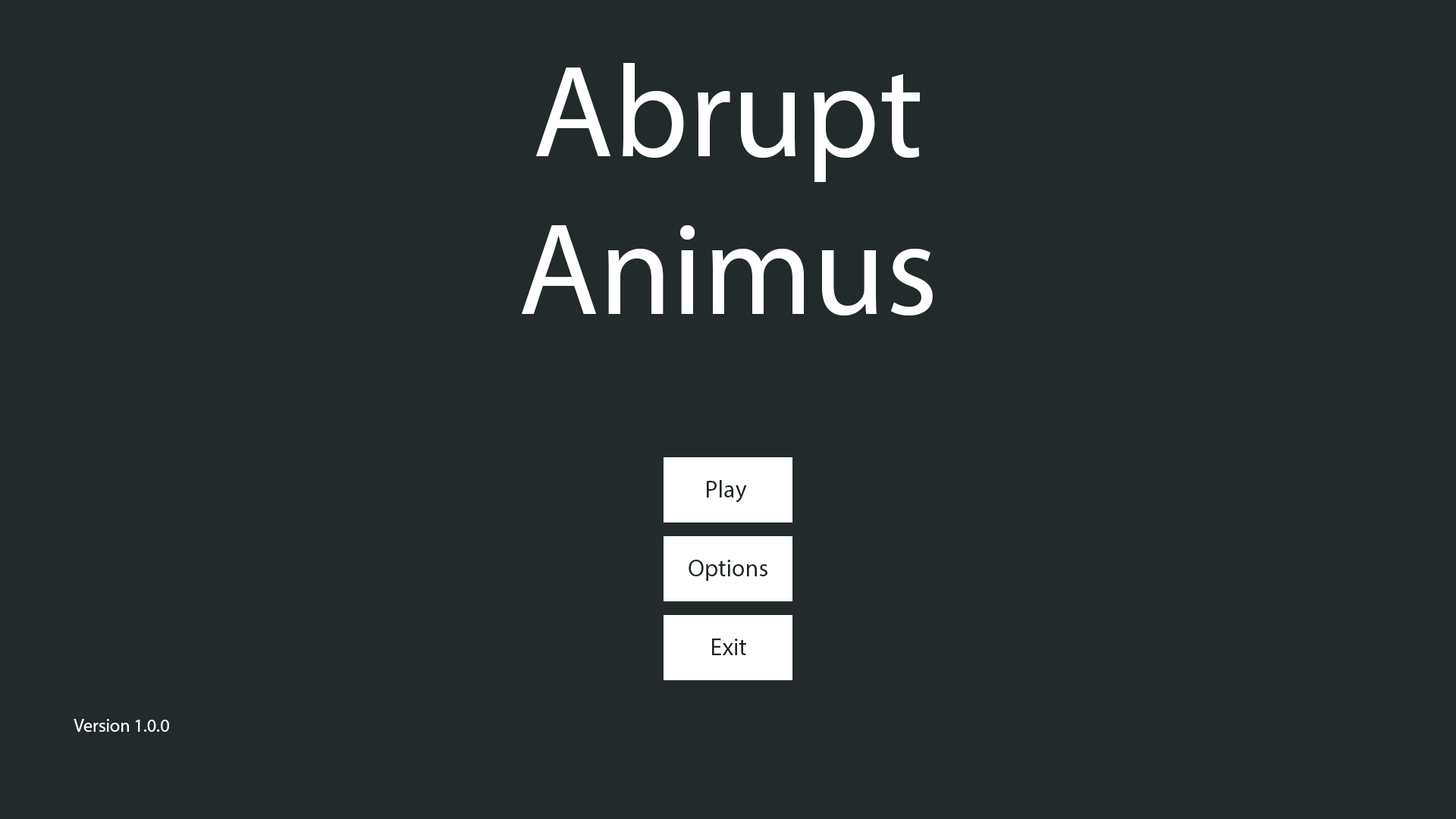
<style>
.page{position:relative;width:1456px;height:819px;background:#222a2b}
.page>*{position:absolute;margin:0}
.t1{font:131.8px "MyriadPro-Regular";color:#ffffff}
.t2{font:24.3px "MyriadPro-Regular";color:#1e2526}
.t3{font:18.2px "MyriadPro-Regular";color:#ffffff}
</style>
<div class="page">
<p class="t1" style="left:522px;top:63px;width:411px;height:253px;text-align:center">Abrupt<br>Animus</p>
<p class="t2" style="left:707px;top:480px;width:40px;height:23px">Play</p>
<p class="t2" style="left:689px;top:560px;width:78px;height:21px">Options</p>
<p class="t2" style="left:712px;top:639px;width:34px;height:16px">Exit</p>
<p class="t3" style="left:74px;top:719px;width:95px;height:13px">Version 1.0.0</p>
</div>
